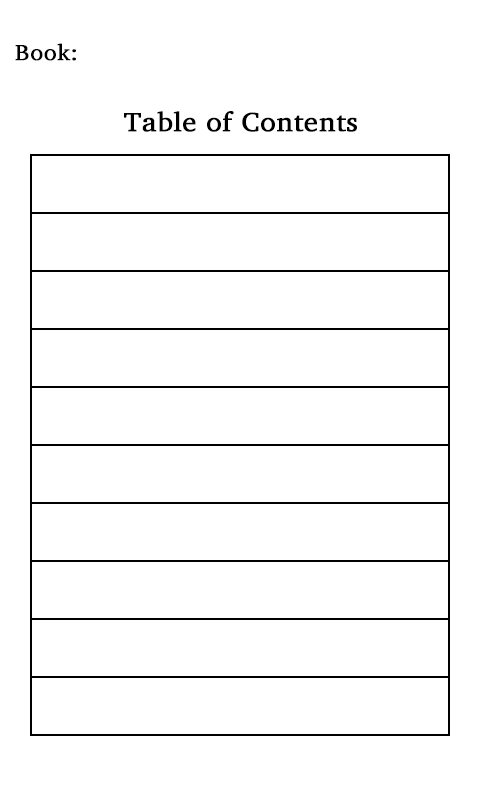
<style>
.page{position:relative;width:480px;height:800px;background:#ffffff}
.page>*{position:absolute;margin:0}
.t1{font:22.5px "Charter";color:#000000;font-weight:bold;scale:1.07 1}
.t2{font:27px "Charter";color:#000000;font-weight:bold;scale:1.07 1}
</style>
<div class="page">
<p class="t1" style="left:15px;top:43px;width:61px;height:18px">Book:</p>
<p class="t2" style="left:124px;top:111px;width:233px;height:21px">Table of Contents</p>
</div>
